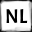
<style>
.page{position:relative;width:32px;height:32px;background:#ffffff}
.page>*{position:absolute;margin:0}
.t1{font:20px "Acme-Regular";color:#000000}
</style>
<div class="page">
<p class="t1" style="left:6px;top:9px;width:22px;height:15px">NL<br>Rig</p>
</div>
